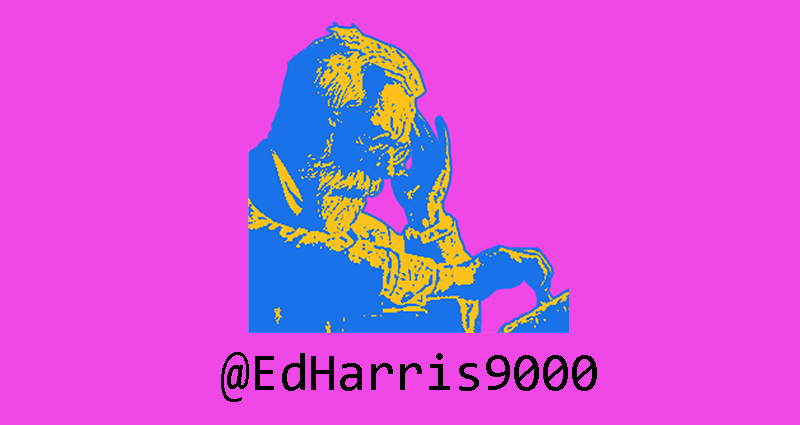
<style>
.page{position:relative;width:800px;height:425px;background:#f048e6}
.page>*{position:absolute;margin:0}
.t1{font:53px "Consolas";color:#000000}
</style>
<div class="page">
<p class="t1" style="left:221px;top:352px;width:376px;height:50px">@EdHarris9000</p>
</div>
